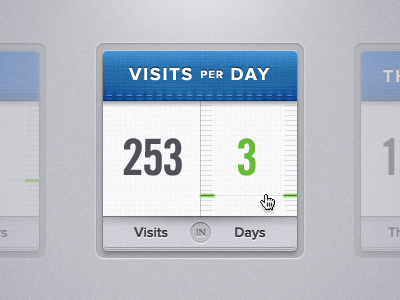
<style>
.page{position:relative;width:400px;height:300px}
.page>*{position:absolute;margin:0}
.t1{font:18px "ProximaNova-Bold";letter-spacing:0.1em;color:#ffffff;text-transform:uppercase}
.t2{font:11px "ProximaNova-Bold";letter-spacing:0.1em;color:#ffffff;text-transform:uppercase}
.t3{font:50px "TradeGothicLTStd-BdCn20";letter-spacing:-0.04em;color:#505058}
.t4{font:50px "TradeGothicLTStd-BdCn20";letter-spacing:-0.04em;color:#66ba34}
.t5{font:14px "ProximaNova-Semibold";color:#4b4b53}
.t6{font:10px "ProximaNova-Semibold";color:#8e8e96}
</style>
<div class="page">
<p class="t1" style="left:128px;top:67px;width:142px;height:14px">VISITS <span class="t2">PER </span>DAY</p>
<p class="t3" style="left:123px;top:138px;width:59px;height:38px">253</p>
<p class="t4" style="left:238px;top:138px;width:18px;height:38px">3</p>
<p class="t5" style="left:134px;top:227px;width:34px;height:11px">Visits</p>
<p class="t6" style="left:196px;top:229px;width:10px;height:7px">IN</p>
<p class="t5" style="left:235px;top:227px;width:31px;height:13px">Days</p>
</div>
